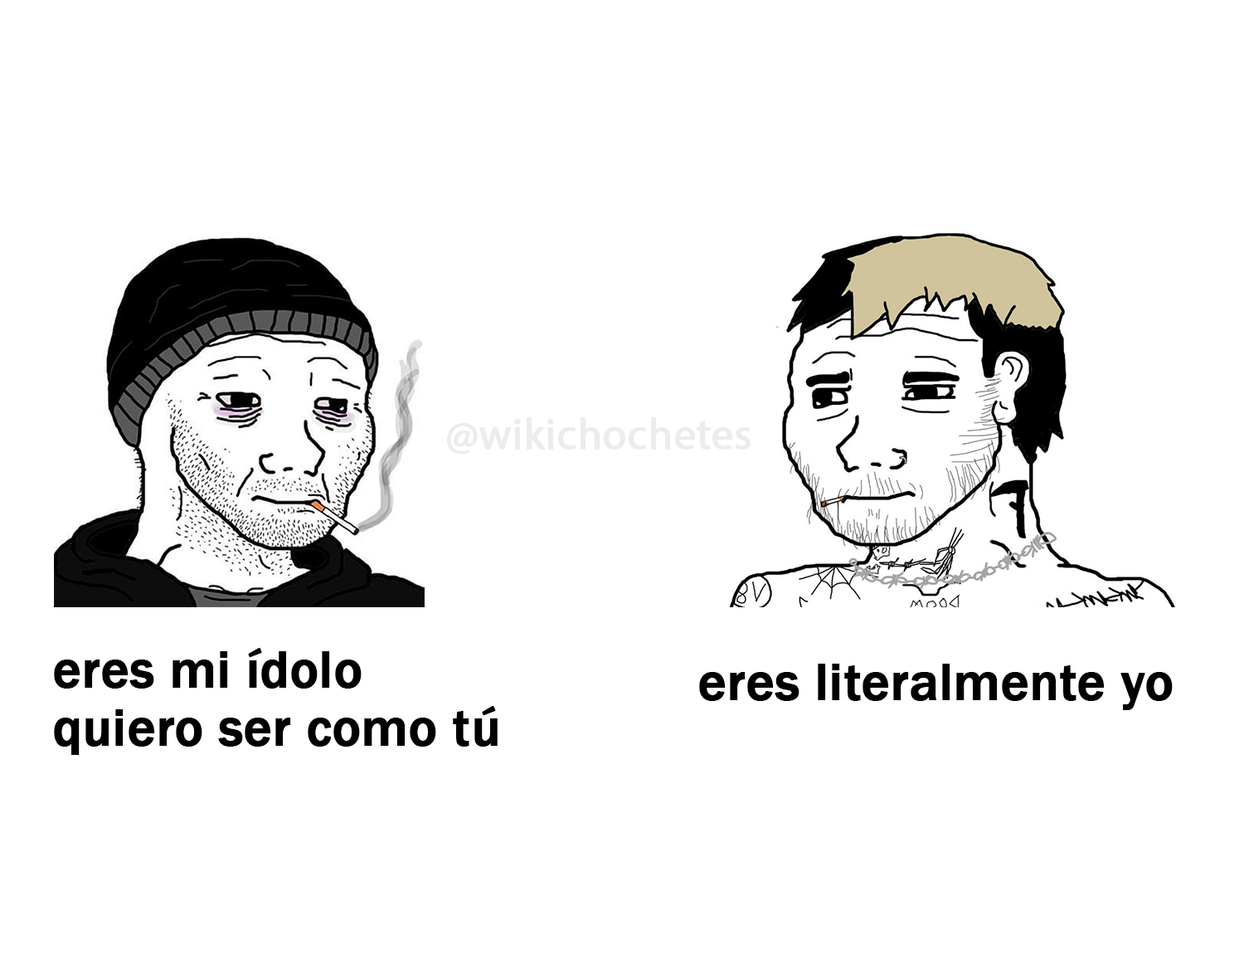
<style>
.page{position:relative;width:1244px;height:959px;background:#ffffff}
.page>*{position:absolute;margin:0}
.t1{font:43.3px "MyriadPro-Regular";color:#ececec;font-weight:bold}
.t2{font:52.7px "FranklinGothic-Medium";color:#000000;font-weight:bold}
</style>
<div class="page">
<p class="t1" style="left:447px;top:417px;width:303px;height:37px">@wikichochetes</p>
<p class="t2" style="left:54px;top:648px;width:444px;height:107px">eres mi ídolo<br>quiero ser como tú</p>
<p class="t2" style="left:699px;top:663px;width:474px;height:47px">eres literalmente yo</p>
</div>
